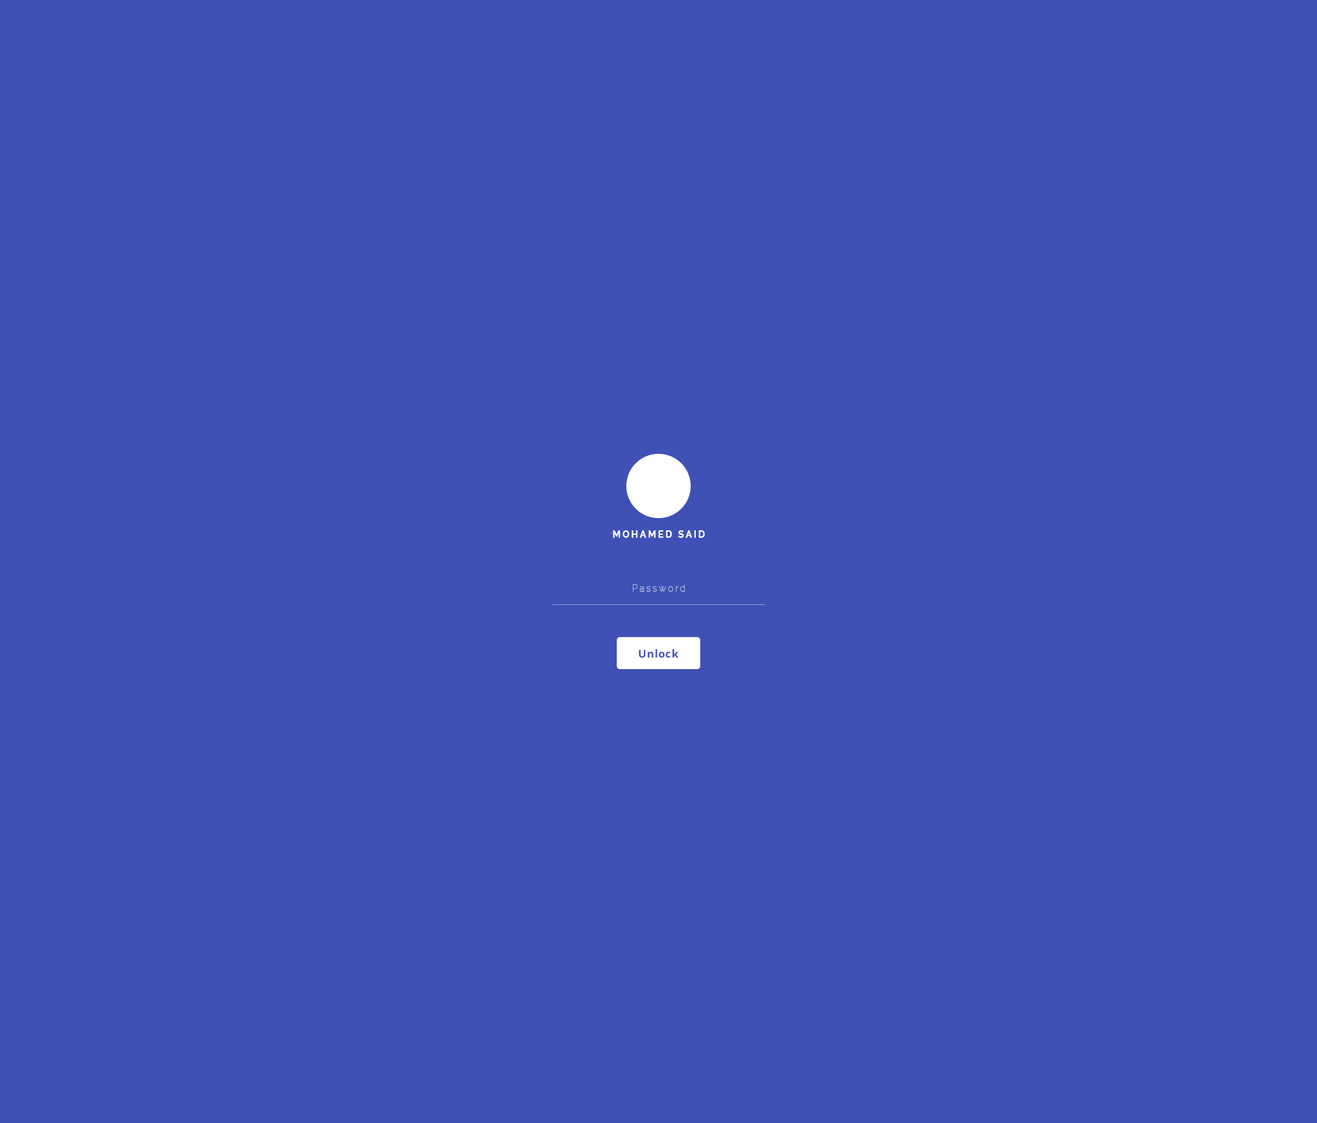
<style>
.page{position:relative;width:1317px;height:1123px;background:#3f51b5}
.page>*{position:absolute;margin:0}
.t1{font:9px "Raleway-SemiBold";letter-spacing:0.2em;color:#ffffff;font-weight:bold}
.t2{font:9px "Raleway-Thin";letter-spacing:0.2em;color:#b0b6dc;font-weight:bold}
.t3{font:10.7px "OpenSans-Bold";letter-spacing:0.05em;color:#3f51b5}
</style>
<div class="page">
<p class="t1" style="left:613px;top:530px;width:92px;height:8px">MOHAMED SAID</p>
<p class="t2" style="left:633px;top:584px;width:52px;height:8px">Password</p>
<p class="t3" style="left:638px;top:649px;width:40px;height:9px">Unlock</p>
</div>
